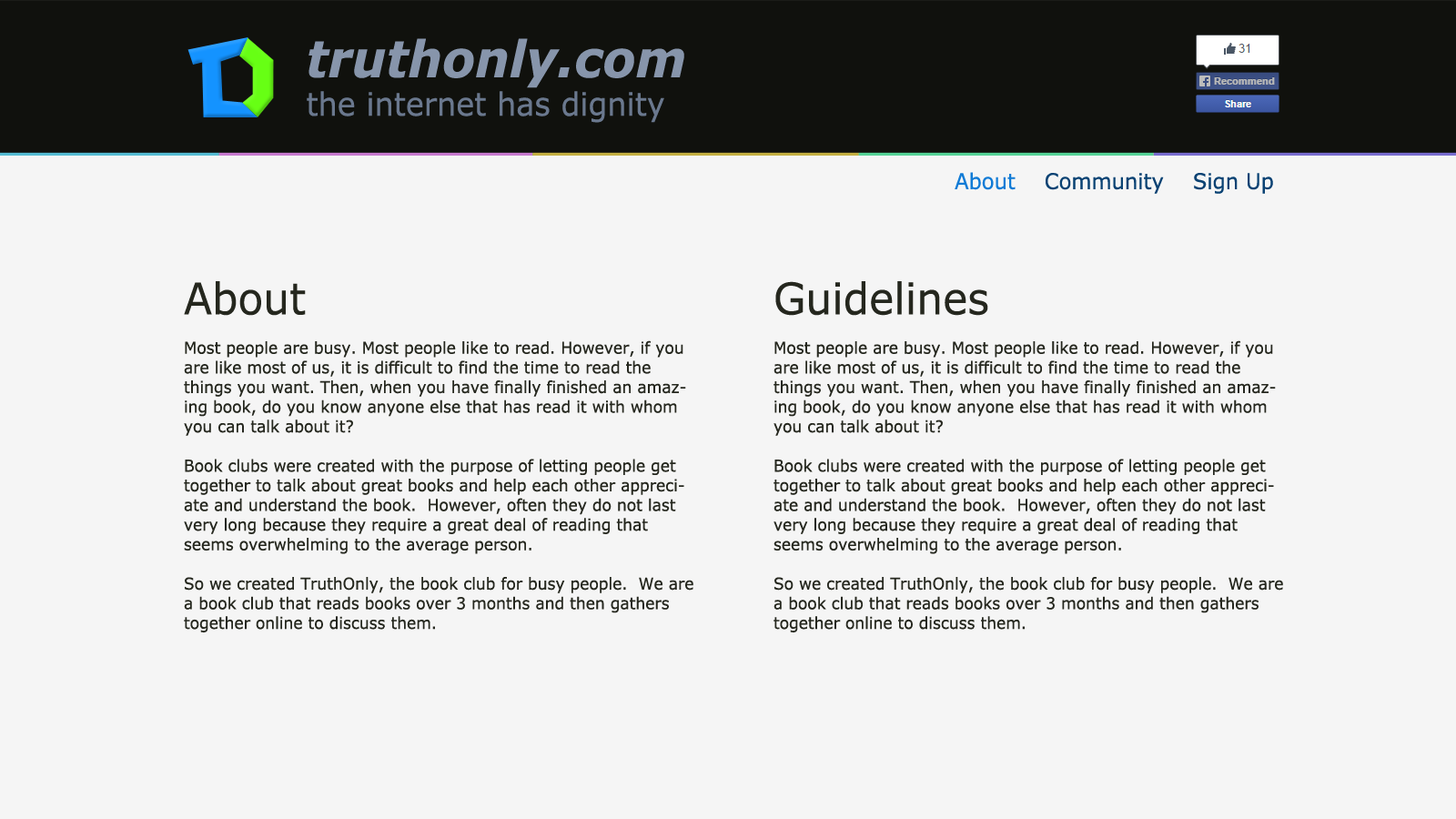
<style>
.page{position:relative;width:1456px;height:819px;background:#f5f5f5}
.page>*{position:absolute;margin:0}
.t1{font:32px "Verdana";color:#8795ab;scale:0.95 1}
.t2{font:50.6px "Verdana-BoldItalic";color:#8795ab;scale:0.95 1}
.t3{font:21.7px "Verdana";color:#094273;scale:0.95 1}
.t4{font:21.7px "Verdana";color:#107bd6;scale:0.95 1}
.t5{font:16.4px "Verdana";color:#25271e;scale:0.95 1}
.t6{font:43.7px "Verdana";color:#25271e;scale:0.95 1}
</style>
<div class="page">
<p class="t1" style="left:307px;top:38px;width:377px;height:85px"><span class="t2">truthonly.com<br></span>the internet has dignity</p>
<p class="t3" style="left:955px;top:172px;width:318px;height:22px"><span class="t4">About    </span>Community    Sign Up</p>
<p class="t5" style="left:184px;top:281px;width:509px;height:351px"><span class="t6">About<br></span><br>Most people are busy. Most people like to read. However, if you are like most of us, it is difficult to find the time to read the things you want. Then, when you have finally finished an amazing book, do you know anyone else that has read it with whom you can talk about it?<br><br>Book clubs were created with the purpose of letting people get together to talk about great books and help each other appreciate and understand the book.  However, often they do not last very long because they require a great deal of reading that seems overwhelming to the average person.<br><br>So we created TruthOnly, the book club for busy people.  We are a book club that reads books over 3 months and then gathers together online to discuss them.</p>
<p class="t5" style="left:773px;top:281px;width:510px;height:351px"><span class="t6">Guidelines<br></span><br>Most people are busy. Most people like to read. However, if you are like most of us, it is difficult to find the time to read the things you want. Then, when you have finally finished an amazing book, do you know anyone else that has read it with whom you can talk about it?<br><br>Book clubs were created with the purpose of letting people get together to talk about great books and help each other appreciate and understand the book.  However, often they do not last very long because they require a great deal of reading that seems overwhelming to the average person.<br><br>So we created TruthOnly, the book club for busy people.  We are a book club that reads books over 3 months and then gathers together online to discuss them.</p>
</div>
